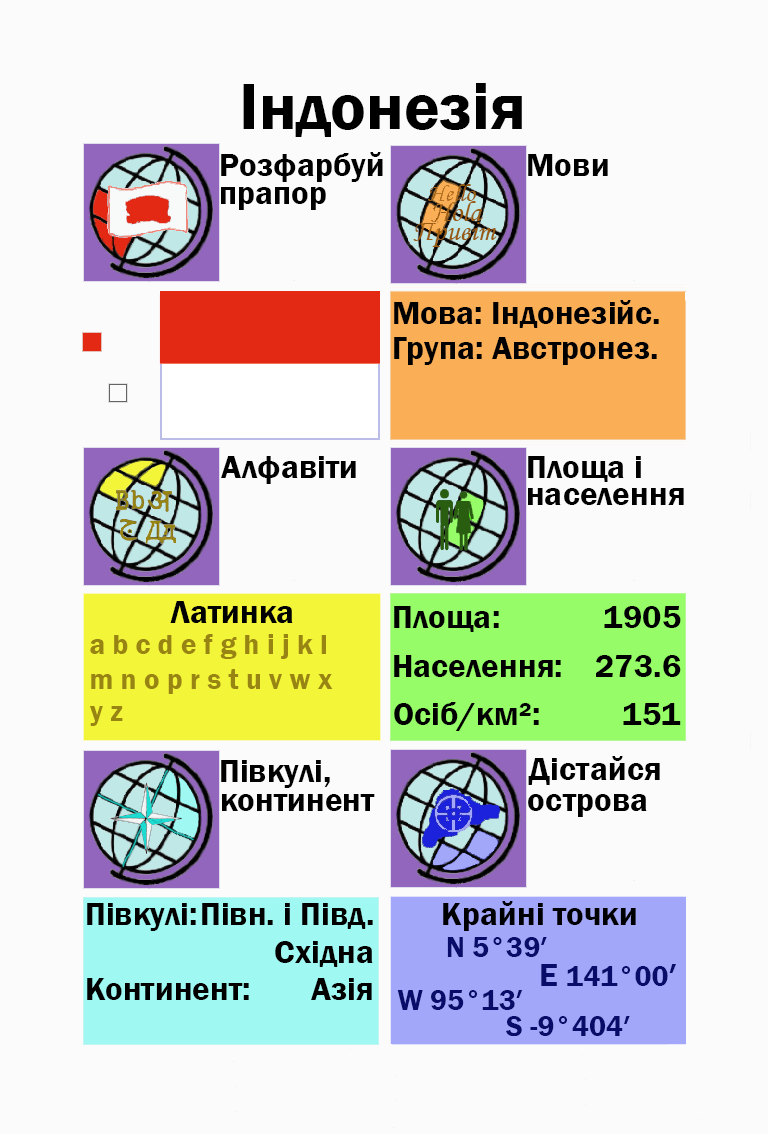
<style>
.page{position:relative;width:768px;height:1134px;background:#fbfbfb}
.page>*{position:absolute;margin:0}
.t1{font:66.7px "FranklinGothic-Demi";color:#000000}
.t2{font:33.3px "FranklinGothic-Demi";color:#000000}
.t3{font:33.3px "FranklinGothic-Demi";color:#000003}
.t4{font:29.2px "FranklinGothic-Demi";color:#988413}
.t5{font:29.2px "FranklinGothic-Demi";color:#090c69}
.t6{font:33.3px "FranklinGothic-Demi";color:#090c69}
</style>
<div class="page">
<p class="t1" style="left:243px;top:83px;width:279px;height:54px">Індонезія</p>
<p class="t2" style="left:221px;top:152px;width:162px;height:30px">Розфарбуй</p>
<p class="t2" style="left:528px;top:154px;width:80px;height:22px">Мови</p>
<p class="t2" style="left:221px;top:187px;width:105px;height:23px">прапор</p>
<p class="t2" style="left:394px;top:300px;width:265px;height:28px">Мова: Індонезійс.</p>
<p class="t2" style="left:394px;top:337px;width:263px;height:28px">Група: Австронез.</p>
<p class="t2" style="left:221px;top:456px;width:135px;height:28px">Алфавіти</p>
<p class="t2" style="left:528px;top:456px;width:113px;height:26px">Площа і</p>
<p class="t2" style="left:528px;top:488px;width:156px;height:17px">населення</p>
<p class="t2" style="left:170px;top:601px;width:123px;height:22px">Латинка</p>
<p class="t2" style="left:394px;top:606px;width:105px;height:26px">Площа:</p>
<p class="t3" style="left:604px;top:606px;width:77px;height:22px">1905</p>
<p class="t4" style="left:90px;top:634px;width:236px;height:25px">a b c d e f g h i j k l</p>
<p class="t2" style="left:394px;top:655px;width:167px;height:22px">Населення:</p>
<p class="t2" style="left:596px;top:655px;width:85px;height:22px">273.6</p>
<p class="t4" style="left:91px;top:669px;width:242px;height:25px">m n o p r s t u v w x</p>
<p class="t2" style="left:394px;top:702px;width:145px;height:29px">Осіб/км²:</p>
<p class="t4" style="left:89px;top:706px;width:34px;height:20px">y z</p>
<p class="t2" style="left:623px;top:703px;width:58px;height:22px">151</p>
<p class="t2" style="left:221px;top:760px;width:109px;height:28px">Півкулі,</p>
<p class="t2" style="left:528px;top:756px;width:132px;height:29px">Дістайся</p>
<p class="t2" style="left:222px;top:794px;width:153px;height:17px">континент</p>
<p class="t2" style="left:528px;top:794px;width:119px;height:23px">острова</p>
<p class="t2" style="left:87px;top:903px;width:109px;height:28px">Півкулі:</p>
<p class="t2" style="left:202px;top:903px;width:171px;height:26px">Півн. і Півд.</p>
<p class="t3" style="left:443px;top:901px;width:193px;height:30px">Крайні точки</p>
<p class="t2" style="left:275px;top:941px;width:98px;height:26px">Східна</p>
<p class="t5" style="left:447px;top:937px;width:100px;height:20px">N 5°39′</p>
<p class="t5" style="left:541px;top:964px;width:135px;height:22px"><span class="t6">E </span>141°00<span class="t6">′</span></p>
<p class="t2" style="left:87px;top:978px;width:162px;height:22px">Континент:</p>
<p class="t2" style="left:311px;top:978px;width:61px;height:22px">Азія</p>
<p class="t5" style="left:397px;top:990px;width:126px;height:20px">W 95°13′</p>
<p class="t5" style="left:506px;top:1016px;width:124px;height:21px">S -9°404′</p>
</div>
